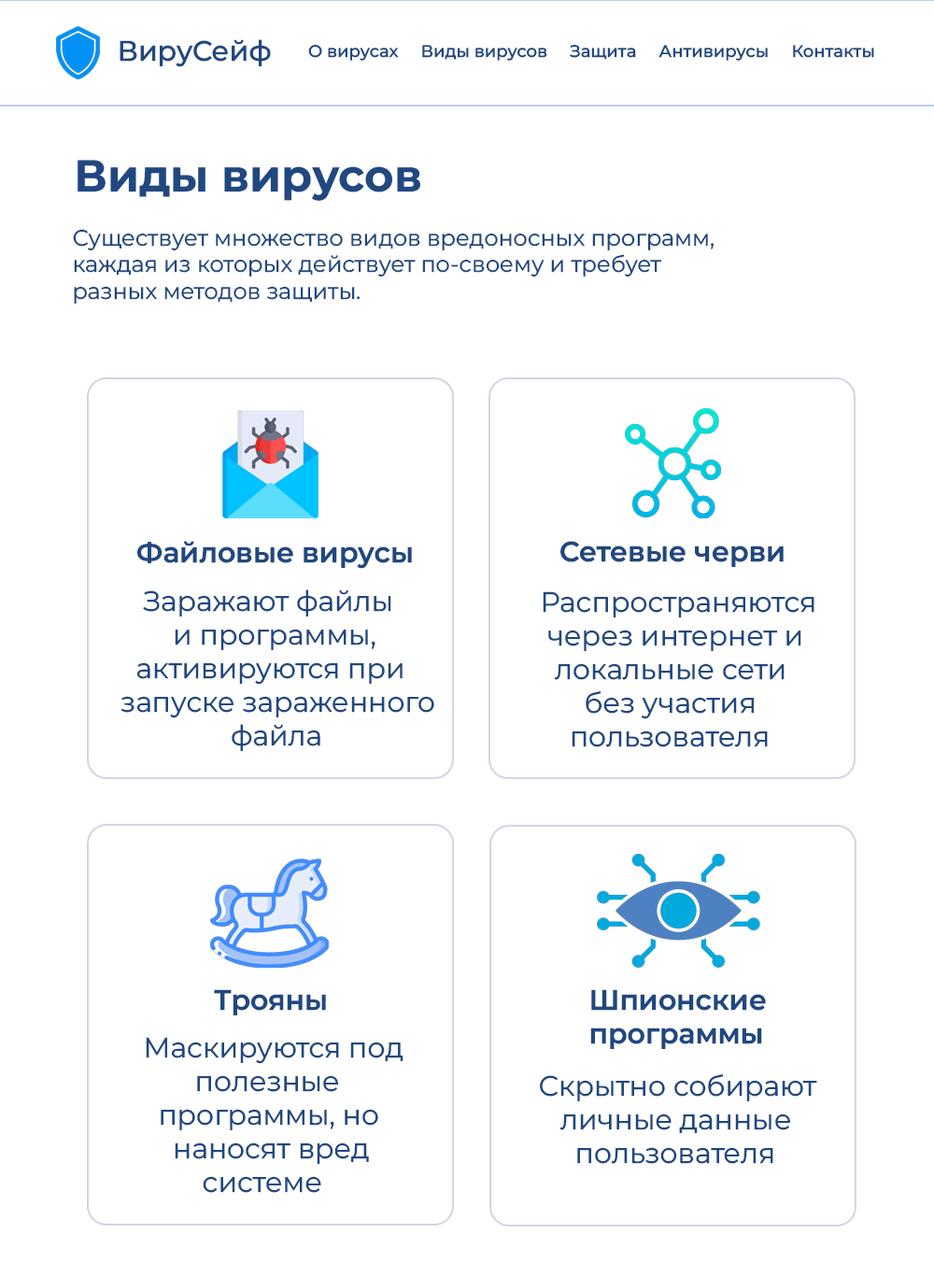
<style>
.page{position:relative;width:934px;height:1276px;background:#ffffff}
.page>*{position:absolute;margin:0}
.t1{font:28px "Montserrat-Medium";color:#204880}
.t2{font:16.8px "Montserrat-Medium";color:#204880}
.t3{font:44.8px "Montserrat-Bold";color:#204880}
.t4{font:22.4px "Montserrat-Regular";color:#204880}
.t5{font:28px "Montserrat-SemiBold";color:#204880}
.t6{font:28px "Montserrat-Regular";color:#204880}
</style>
<div class="page">
<p class="t1" style="left:120px;top:39px;width:151px;height:28px">ВируСейф</p>
<p class="t2" style="left:308px;top:45px;width:567px;height:16px">О вирусах     Виды вирусов     Защита     Антивирусы     Контакты</p>
<p class="t3" style="left:78px;top:160px;width:343px;height:41px">Виды вирусов</p>
<p class="t4" style="left:73px;top:229px;width:641px;height:75px">Существует множество видов вредоносных программ, <br>каждая из которых действует по-своему и требует <br>разных методов защиты.</p>
<p class="t5" style="left:137px;top:541px;width:275px;height:28px">Файловые вирусы</p>
<p class="t5" style="left:561px;top:541px;width:223px;height:26px">Сетевые черви</p>
<p class="t6" style="left:137px;top:590px;width:266px;height:95px">Заражают файлы <br>     и программы, <br>активируются при</p>
<p class="t6" style="left:543px;top:591px;width:272px;height:156px">Распространяются <br> через интернет и <br>  локальные сети <br>      без участия <br>    пользователя</p>
<p class="t6" style="left:121px;top:696px;width:313px;height:55px">запуске зараженного<br>               файла</p>
<p class="t5" style="left:214px;top:989px;width:112px;height:27px">Трояны</p>
<p class="t5" style="left:590px;top:989px;width:176px;height:60px">Шпионские <br>программы</p>
<p class="t6" style="left:146px;top:1037px;width:258px;height:156px">Маскируются под <br>          полезные <br>     программы, но <br>       наносят вред <br>           системе</p>
<p class="t6" style="left:540px;top:1074px;width:278px;height:90px">Скрытно собирают<br>   личные данные <br>     пользователя</p>
</div>
